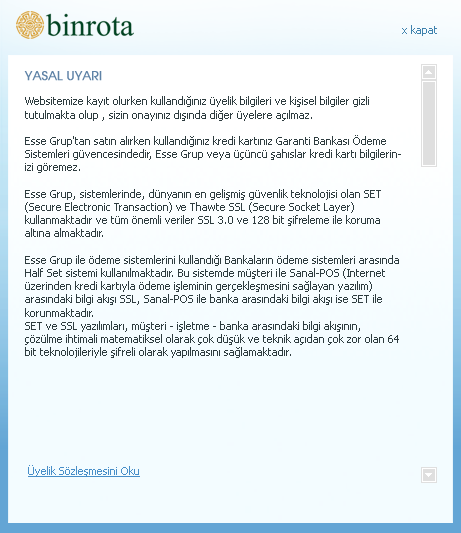
<style>
.page{position:relative;width:461px;height:533px;background:#f3fcff}
.page>*{position:absolute;margin:0}
.t1{font:11px "Tahoma";color:#3f82ad}
.t2{font:12px "TRAvalonPlain";color:#5e82a6;font-weight:bold}
.t3{font:11px "Tahoma";color:#2e3c3f}
.t4{font:11px "Tahoma";color:#478ec8;text-decoration:underline}
</style>
<div class="page">
<p class="t1" style="left:402px;top:25px;width:35px;height:11px">x kapat</p>
<p class="t2" style="left:24px;top:71px;width:78px;height:10px">YASAL UYARI</p>
<p class="t3" style="left:25px;top:96px;width:376px;height:262px">Websitemize kayıt olurken kullandığınız üyelik bilgileri ve kişisel bilgiler gizli tutulmakta olup , sizin onayınız dışında diğer üyelere açılmaz.<br><br>Esse Grup'tan satın alırken kullandığınız kredi kartınız Garanti Bankası Ödeme Sistemleri güvencesindedir, Esse Grup veya üçüncü şahıslar kredi kartı bilgilerinizi göremez.<br><br>Esse Grup, sistemlerinde, dünyanın en gelişmiş güvenlik teknolojisi olan SET (Secure Electronic Transaction) ve Thawte SSL (Secure Socket Layer) kullanmaktadır ve tüm önemli veriler SSL 3.0 ve 128 bit şifreleme ile koruma altına almaktadır.<br><br>Esse Grup ile ödeme sistemlerini kullandığı Bankaların ödeme sistemleri arasında Half Set sistemi kullanılmaktadır. Bu sistemde müşteri ile Sanal-POS (Internet üzerinden kredi kartıyla ödeme işleminin gerçekleşmesini sağlayan yazılım) arasındaki bilgi akışı SSL, Sanal-POS ile banka arasındaki bilgi akışı ise SET ile korunmaktadır.<br>SET ve SSL yazılımları, müşteri - işletme - banka arasındaki bilgi akışının, çözülme ihtimali matematiksel olarak çok düşük ve teknik açıdan çok zor olan 64 bit teknolojileriyle şifreli olarak yapılmasını sağlamaktadır.</p>
<p class="t4" style="left:28px;top:465px;width:112px;height:12px">Üyelik Sözleşmesini Oku</p>
</div>
